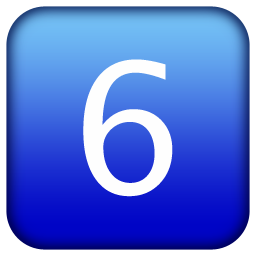
<style>
.page{position:relative;width:256px;height:256px}
.page>*{position:absolute;margin:0}
.t1{font:180px "LucidaGrande";color:#fefefe;font-variant:small-caps}
</style>
<div class="page">
<p class="t1" style="left:83px;top:59px;width:90px;height:138px">6</p>
</div>
